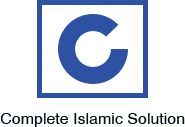
<style>
.page{position:relative;width:185px;height:127px;background:#ffffff}
.page>*{position:absolute;margin:0}
.t1{font:16px "Helvetica";color:#010e16}
</style>
<div class="page">
<p class="t1" style="left:0px;top:113px;width:185px;height:14px">Complete Islamic Solution</p>
</div>
